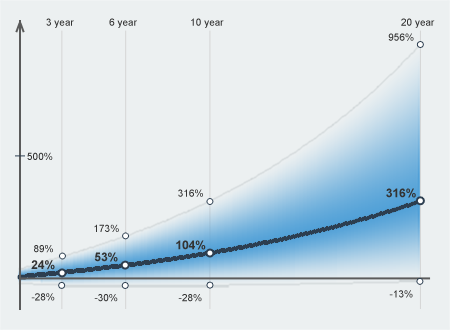
<style>
.page{position:relative;width:450px;height:330px;background:#ecf0f1}
.page>*{position:absolute;margin:0}
.t1{font:10px "ArialMT";color:#333333}
.t2{font:12px "Arial-BoldMT";color:#333333}
</style>
<div class="page">
<p class="t1" style="left:46px;top:18px;width:28px;height:10px">3 year</p>
<p class="t1" style="left:109px;top:18px;width:28px;height:10px">6 year</p>
<p class="t1" style="left:191px;top:18px;width:33px;height:10px">10 year</p>
<p class="t1" style="left:401px;top:18px;width:34px;height:10px">20 year</p>
<p class="t1" style="left:388px;top:33px;width:26px;height:8px">956%</p>
<p class="t1" style="left:27px;top:152px;width:26px;height:8px">500%</p>
<p class="t1" style="left:178px;top:189px;width:25px;height:8px">316%</p>
<p class="t2" style="left:386px;top:188px;width:30px;height:10px">316%</p>
<p class="t1" style="left:94px;top:224px;width:25px;height:8px">173%</p>
<p class="t1" style="left:34px;top:245px;width:19px;height:8px">89%</p>
<p class="t2" style="left:176px;top:240px;width:30px;height:10px">104%</p>
<p class="t2" style="left:94px;top:252px;width:24px;height:10px">53%</p>
<p class="t2" style="left:31px;top:260px;width:24px;height:10px">24%</p>
<p class="t1" style="left:31px;top:293px;width:24px;height:8px">-28%</p>
<p class="t1" style="left:94px;top:294px;width:24px;height:8px">-30%</p>
<p class="t1" style="left:178px;top:294px;width:24px;height:8px">-28%</p>
<p class="t1" style="left:389px;top:290px;width:24px;height:8px">-13%</p>
</div>
